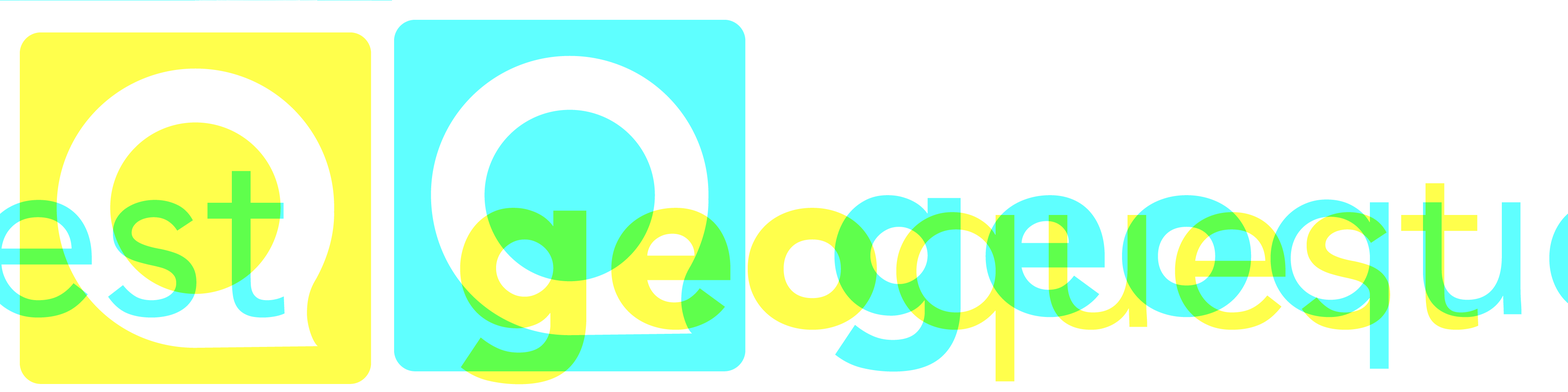
<style>
.page{position:relative;width:1568px;height:392px;background:#ffffff}
.page>*{position:absolute;margin:0}
.t1{font:238.9px "Avenir-Roman"}
.t2{font:238.9px "Avenir-Black"}
</style>
<div class="page">
<p class="t1" style="left:460px;top:170px;width:1018px;height:202px"><span class="t2">geo</span>quest</p>
</div>
